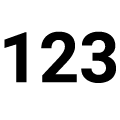
<style>
.page{position:relative;width:120px;height:120px;background:#ffffff}
.page>*{position:absolute;margin:0}
.t1{font:70px "Roboto-Bold";color:#000000}
</style>
<div class="page">
<p class="t1" style="left:4px;top:31px;width:112px;height:52px">123</p>
</div>
